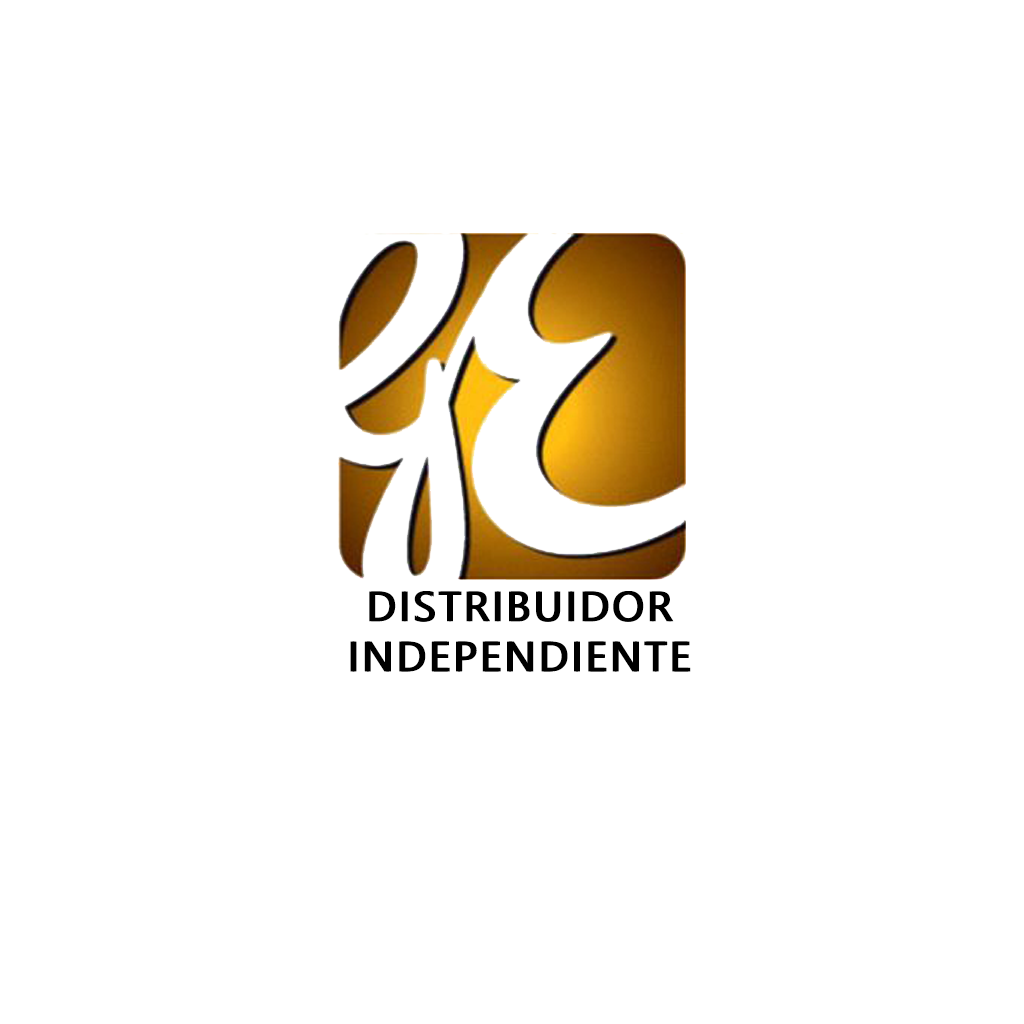
<style>
.page{position:relative;width:1024px;height:1024px;background:#ffffff}
.page>*{position:absolute;margin:0}
.t1{font:41.8px "SegoeUIHistoric";letter-spacing:0.05em;color:#000000;font-weight:bold}
</style>
<div class="page">
<p class="t1" style="left:350px;top:591px;width:339px;height:81px;text-align:center">DISTRIBUIDOR<br>INDEPENDIENTE</p>
<p class="t1" style="left:352px;top:591px;width:339px;height:81px;text-align:center">DISTRIBUIDOR<br>INDEPENDIENTE</p>
</div>
